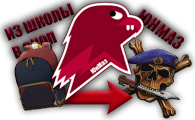
<style>
.page{position:relative;width:195px;height:120px}
.page>*{position:absolute;margin:0}
.t1{font:15.8px "Impact"}
.t2{font:17px "Impact"}
</style>
<div class="page">
<p class="t1" style="left:4px;top:3px;width:71px;height:56px;rotate:-22deg">ИЗ ШКОЛЫ <br>В ОКОП</p>
<p class="t2" style="left:135px;top:8px;width:49px;height:41px;rotate:36deg">ЮНМАЗ</p>
</div>
